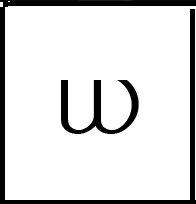
<style>
.page{position:relative;width:196px;height:204px;background:#ffffff}
.page>*{position:absolute;margin:0}
.t1{font:72px "Klaudia";color:#000000}
</style>
<div class="page">
<p class="t1" style="left:61px;top:79px;width:78px;height:54px">W</p>
</div>
